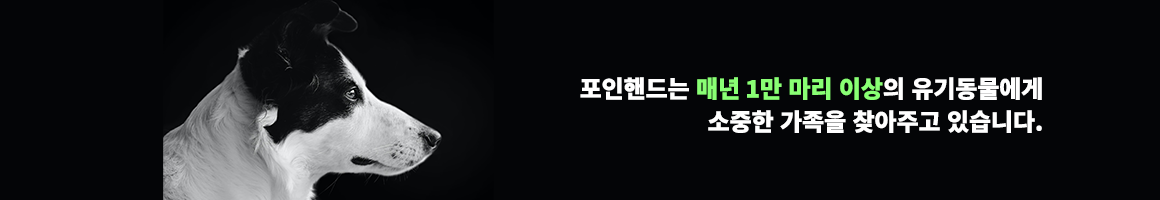
<style>
.page{position:relative;width:1160px;height:200px;background:#040507}
.page>*{position:absolute;margin:0}
.t1{font:24px "NotoSansKR-Black";letter-spacing:-0.005em;color:#89ff74}
.t2{font:24px "NotoSansKR-Black";letter-spacing:-0.005em;color:#ffffff}
</style>
<div class="page">
<p class="t1" style="left:580px;top:77px;width:462px;height:23px"><span class="t2">포인핸드는 </span>매년 1만 마리 이상<span class="t2">의 유기동물에게</span></p>
<p class="t2" style="left:708px;top:110px;width:334px;height:23px">소중한 가족을 찾아주고 있습니다.</p>
</div>
